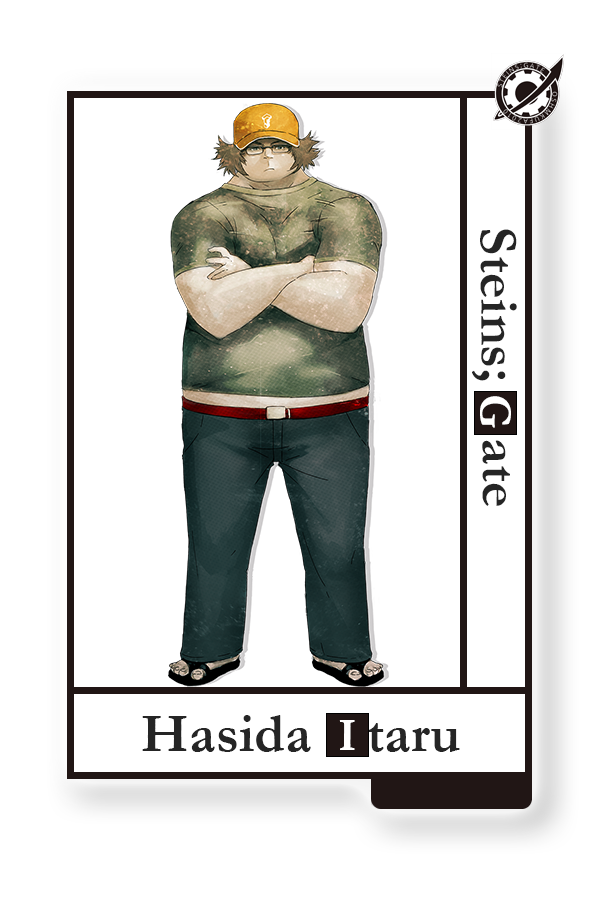
<style>
.page{position:relative;width:600px;height:900px;background:#ffffff}
.page>*{position:absolute;margin:0}
.t1{font:55.4px "Garamond-Bold";color:#252525}
.t2{font:47px "Garamond-Bold";color:#ffffff}
</style>
<div class="page">
<p class="t1" style="left:472px;top:229px;width:45px;height:277px;rotate:89deg">Steins;    ate</p>
<p class="t2" style="left:480px;top:396px;width:31px;height:32px;rotate:90deg">G</p>
<p class="t1" style="left:142px;top:715px;width:318px;height:37px">Hasida    taru</p>
<p class="t2" style="left:339px;top:720px;width:16px;height:30px">I</p>
</div>
